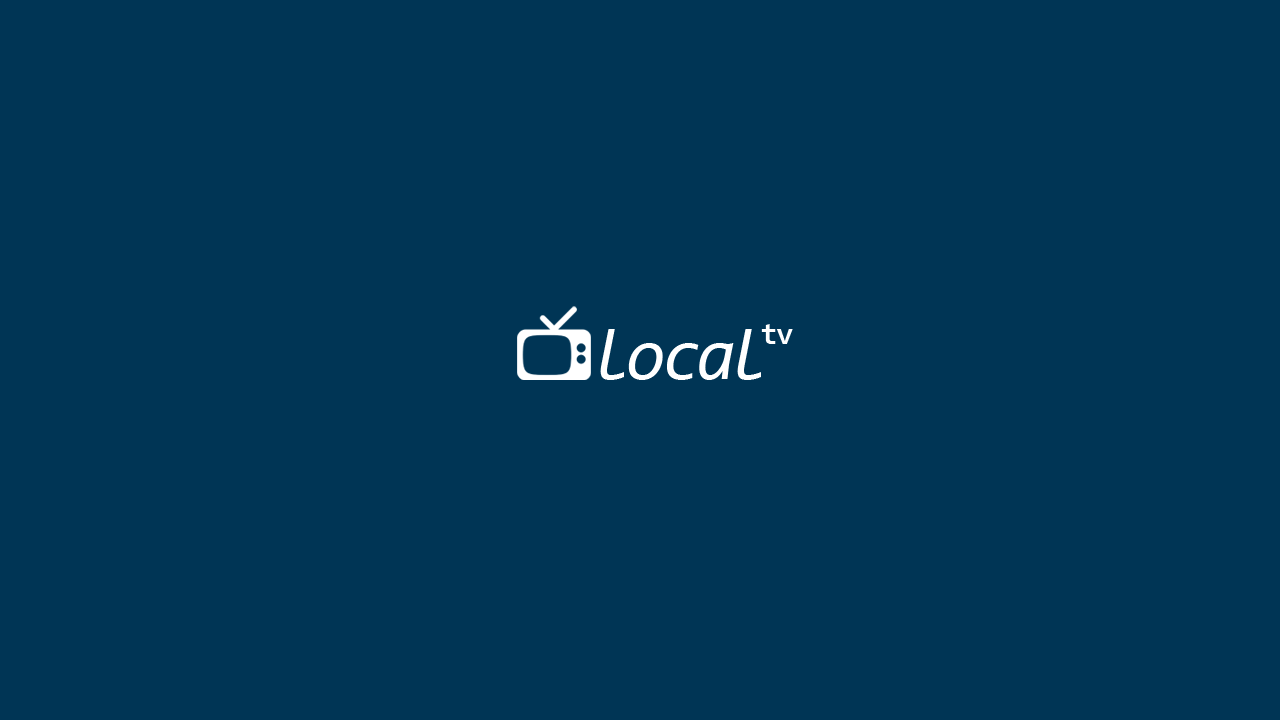
<style>
.page{position:relative;width:1280px;height:720px;background:#003555}
.page>*{position:absolute;margin:0}
.t1{font:72px "Consolas-Italic";letter-spacing:-0.02em;color:#ffffff}
.t2{font:30px "Consolas-Bold";letter-spacing:-0.02em;color:#ffffff}
</style>
<div class="page">
<p class="t1" style="left:600px;top:329px;width:161px;height:51px">local</p>
<p class="t2" style="left:761px;top:324px;width:32px;height:20px">tv</p>
</div>
